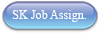
<style>
.page{position:relative;width:100px;height:33px}
.page>*{position:absolute;margin:0}
.t1{font:12.1px "TimesNewRomanPSMT";color:#fefefe}
</style>
<div class="page">
<p class="t1" style="left:12px;top:10px;width:74px;height:12px">SK Job Assign.</p>
</div>
